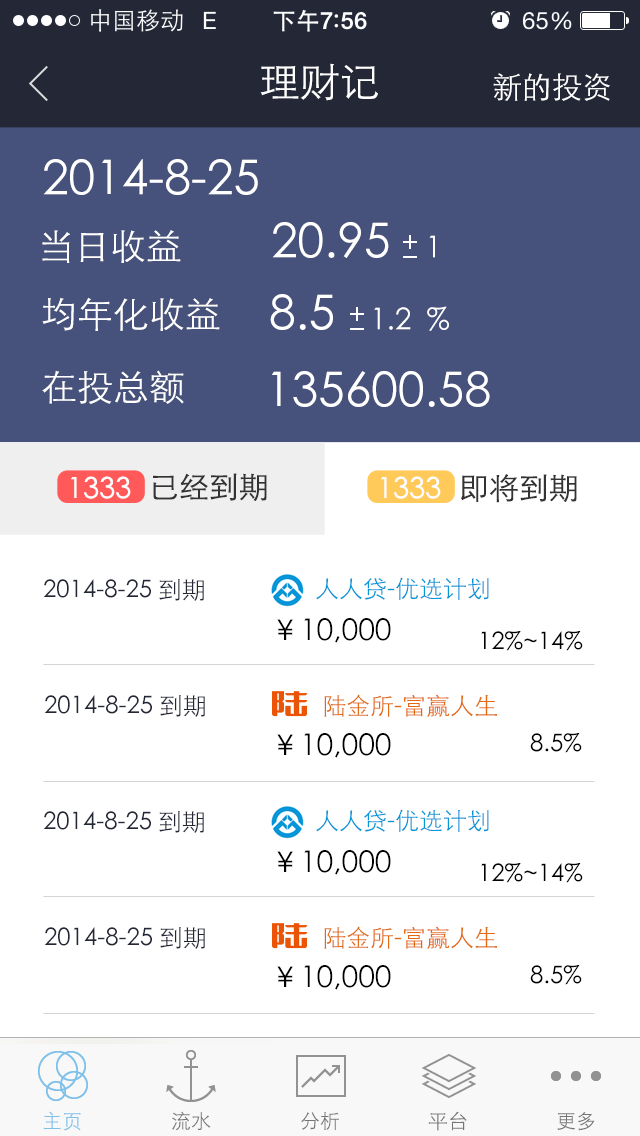
<style>
.page{position:relative;width:640px;height:1136px;background:#ffffff}
.page>*{position:absolute;margin:0}
.t1{font:40px "STXihei";color:#ffffff}
.t2{font:30px "STXihei";color:#ffffff}
.t3{font:48px "STXihei";color:#ffffff}
.t4{font:36px "STXihei";color:#ffffff}
.t5{font:30px "STXihei";color:#333333}
.t6{font:29px "STXihei";color:#fefefe}
.t7{font:24px "STXihei";color:#232736}
.t8{font:24px "STXihei";color:#0697d9}
.t9{font:30px "STXihei";color:#000000}
.t10{font:24px "STXihei";color:#000000}
.t11{font:24px "STXihei";color:#e26a12}
.t12{font:20px "STXihei";color:#7fc0e9}
.t13{font:20px "STXihei";color:#757575}
</style>
<div class="page">
<p class="t1" style="left:260px;top:63px;width:118px;height:38px">理财记</p>
<p class="t2" style="left:493px;top:73px;width:117px;height:28px">新的投资</p>
<p class="t3" style="left:43px;top:159px;width:215px;height:36px">2014-8-25</p>
<p class="t3" style="left:272px;top:222px;width:163px;height:36px">20.95 <span class="t2">   1</span></p>
<p class="t4" style="left:42px;top:230px;width:139px;height:33px">当日收益</p>
<p class="t2" style="left:403px;top:235px;width:14px;height:14px">+</p>
<p class="t2" style="left:270px;top:294px;width:179px;height:37px"><span class="t3">8.5 </span>   1.2  %</p>
<p class="t4" style="left:42px;top:297px;width:178px;height:34px">均年化收益</p>
<p class="t2" style="left:350px;top:307px;width:14px;height:14px">+</p>
<p class="t4" style="left:42px;top:370px;width:142px;height:34px">在投总额</p>
<p class="t3" style="left:272px;top:371px;width:218px;height:36px">135600.58</p>
<p class="t5" style="left:153px;top:473px;width:114px;height:28px">已经到期</p>
<p class="t6" style="left:71px;top:476px;width:60px;height:23px">1333</p>
<p class="t6" style="left:381px;top:476px;width:60px;height:23px">1333</p>
<p class="t5" style="left:461px;top:474px;width:116px;height:29px">即将到期</p>
<p class="t7" style="left:43px;top:579px;width:161px;height:22px">2014-8-25 到期</p>
<p class="t8" style="left:316px;top:577px;width:173px;height:23px">人人贷-优选计划</p>
<p class="t9" style="left:277px;top:618px;width:114px;height:25px">￥10,000</p>
<p class="t10" style="left:481px;top:631px;width:102px;height:20px">12%~14%</p>
<p class="t7" style="left:44px;top:695px;width:161px;height:22px">2014-8-25 到期</p>
<p class="t11" style="left:324px;top:694px;width:173px;height:23px">陆金所-富赢人生</p>
<p class="t9" style="left:277px;top:733px;width:114px;height:25px">￥10,000</p>
<p class="t10" style="left:530px;top:733px;width:52px;height:20px">8.5%</p>
<p class="t8" style="left:316px;top:809px;width:173px;height:23px">人人贷-优选计划</p>
<p class="t7" style="left:43px;top:811px;width:161px;height:22px">2014-8-25 到期</p>
<p class="t9" style="left:277px;top:850px;width:114px;height:25px">￥10,000</p>
<p class="t10" style="left:481px;top:863px;width:102px;height:20px">12%~14%</p>
<p class="t7" style="left:44px;top:927px;width:161px;height:22px">2014-8-25 到期</p>
<p class="t11" style="left:324px;top:926px;width:173px;height:23px">陆金所-富赢人生</p>
<p class="t9" style="left:277px;top:965px;width:114px;height:25px">￥10,000</p>
<p class="t10" style="left:530px;top:965px;width:52px;height:20px">8.5%</p>
<p class="t12" style="left:43px;top:1111px;width:38px;height:20px">主页</p>
<p class="t13" style="left:172px;top:1111px;width:39px;height:20px">流水</p>
<p class="t13" style="left:301px;top:1111px;width:38px;height:19px">分析</p>
<p class="t13" style="left:428px;top:1111px;width:39px;height:20px">平台</p>
<p class="t13" style="left:557px;top:1112px;width:38px;height:19px">更多</p>
</div>
